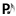
<style>
.page{position:relative;width:16px;height:16px;background:#ffffff}
.page>*{position:absolute;margin:0}
.t1{font:14.3px "Verdana";letter-spacing:-0.075em;color:#000000;font-weight:bold}
</style>
<div class="page">
<p class="t1" style="left:2px;top:3px;width:8px;height:11px">P</p>
</div>
